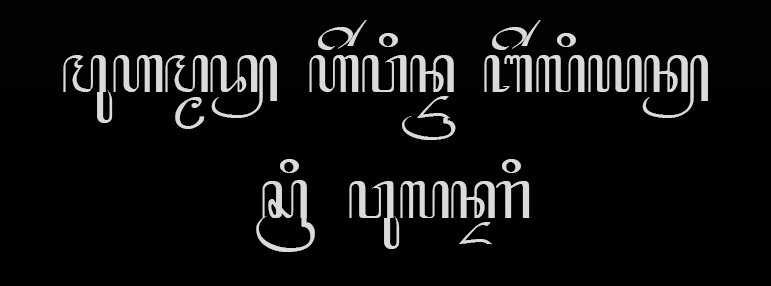
<style>
.page{position:relative;width:771px;height:286px;background:#010101}
.page>*{position:absolute;margin:0}
.t1{font:48px/32px "HanacarakaNormal";letter-spacing:-0.06em;color:#dadada}
.t2{font:73px "HanacarakaNormal";letter-spacing:-0.06em;color:#dadada;scale:0.72 1}
</style>
<div class="page">
<p class="t1" style="left:63px;top:20px;width:645px;height:120px">muamMf\   ae/winF`   be/liyn\</p>
<p class="t1" style="left:262px;top:159px;width:268px;height:90px">si    wulnFri</p>
<p class="t2" style="left:256px;top:216px;width:59px;height:36px">``</p>
</div>
